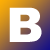
<style>
.page{position:relative;width:50px;height:50px;background:#ffffff}
.page>*{position:absolute;margin:0}
.t1{font:48px "Arial-Black";color:#ffffff}
</style>
<div class="page">
<p class="t1" style="left:9px;top:7px;width:33px;height:35px">B</p>
</div>
